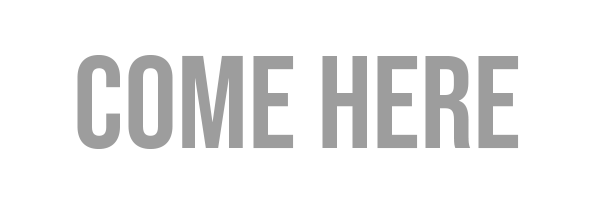
<style>
.page{position:relative;width:594px;height:204px;background:#ffffff}
.page>*{position:absolute;margin:0}
.t1{font:131.8px "BebasNeue-Regular";color:#9d9d9d}
</style>
<div class="page">
<p class="t1" style="left:77px;top:55px;width:442px;height:95px">Come here</p>
</div>
